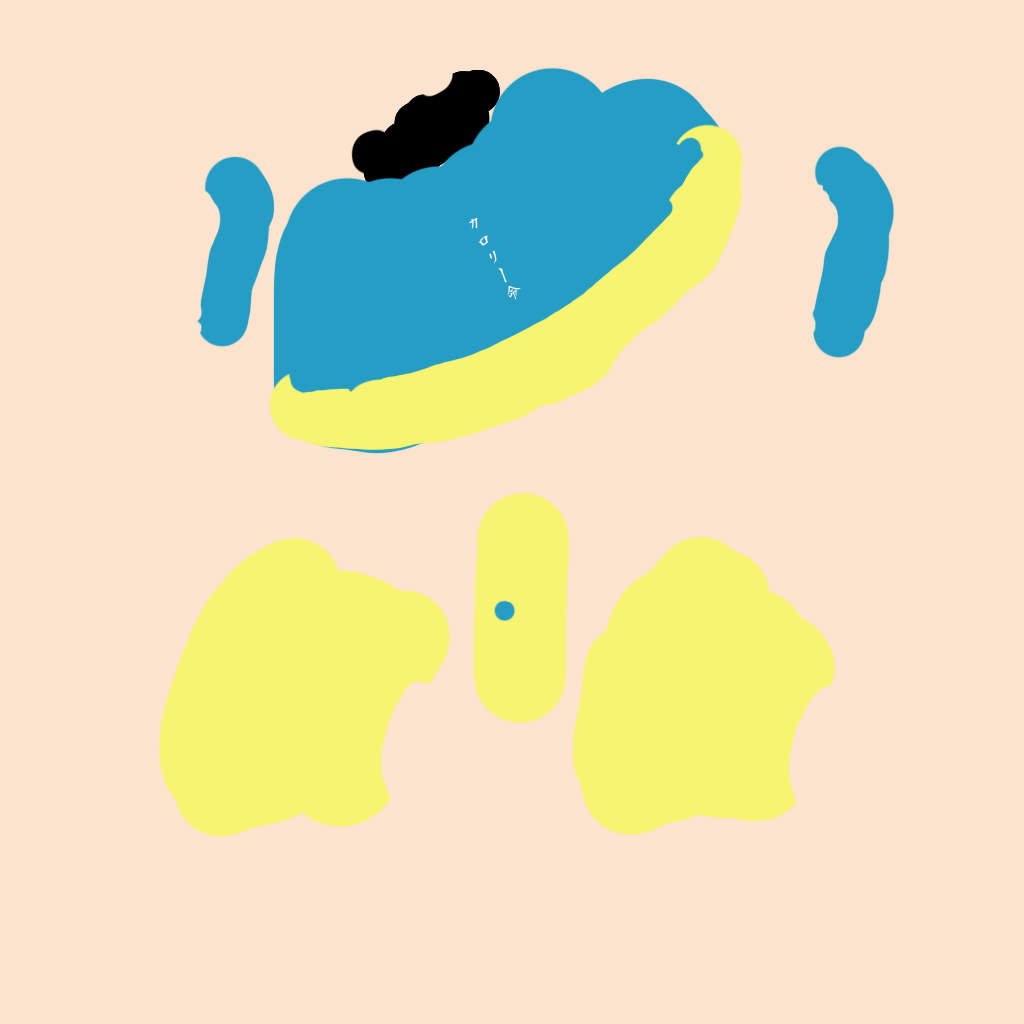
<style>
.page{position:relative;width:1024px;height:1024px;background:#fce3cd}
.page>*{position:absolute;margin:0}
.t1{font:18.4px "AoyagiKouzanFontT";letter-spacing:0.06em;color:#ffffff;font-style:italic}
</style>
<div class="page">
<p class="t1" style="left:469px;top:218px;width:52px;height:82px;rotate:-30deg">カロリー命</p>
</div>
